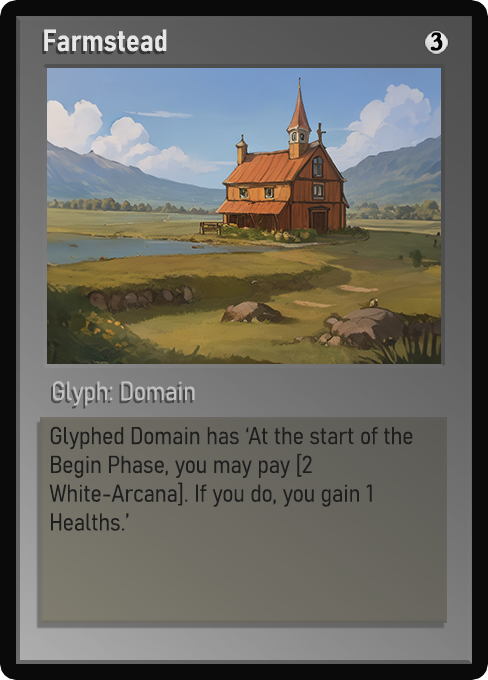
<style>
.page{position:relative;width:488px;height:680px}
.page>*{position:absolute;margin:0}
.t1{font:30px "Bahnschrift-SemiBoldSemiCondensed";color:#f2f2f2;font-weight:bold}
.t2{font:25px "WTRRoycroft";color:#000000;font-weight:bold;scale:1.09 1}
.t3{font:26px "Bahnschrift-LightSemiCondensed";color:#c8c8c8;font-weight:bold}
.t4{font:24px "Bahnschrift-LightSemiCondensed";color:#1e1e1e;font-weight:bold}
</style>
<div class="page">
<p class="t1" style="left:44px;top:29px;width:123px;height:23px;opacity:0.9">Farmstead</p>
<p class="t2" style="left:430px;top:32px;width:13px;height:19px">3</p>
<p class="t3" style="left:53px;top:381px;width:142px;height:25px;opacity:0.9">Glyph: Domain</p>
<p class="t4" style="left:49px;top:426px;width:364px;height:105px">Glyphed Domain has ‘At the start of the Begin Phase, you may pay [2 White-Arcana]. If you do, you gain 1 Healths.’</p>
</div>
